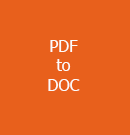
<style>
.page{position:relative;width:130px;height:135px;background:#e8601c}
.page>*{position:absolute;margin:0}
.t1{font:12px "Tahoma";color:#fcfcfa}
</style>
<div class="page">
<p class="t1" style="left:48px;top:40px;width:32px;height:51px;text-align:center">PDF<br>to<br>DOC</p>
</div>
